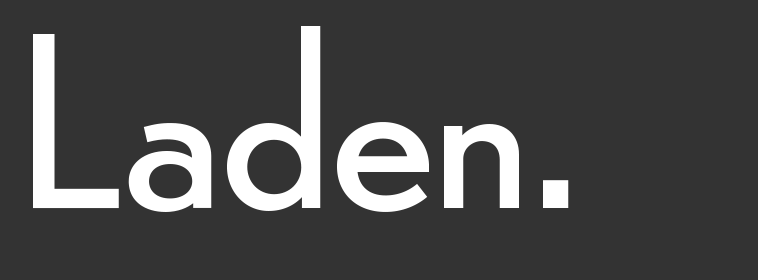
<style>
.page{position:relative;width:758px;height:280px;background:#333333}
.page>*{position:absolute;margin:0}
.t1{font:233.7px "DunbarLow-Book";color:#ffffff}
</style>
<div class="page">
<p class="t1" style="left:33px;top:26px;width:536px;height:186px">Laden.</p>
</div>
